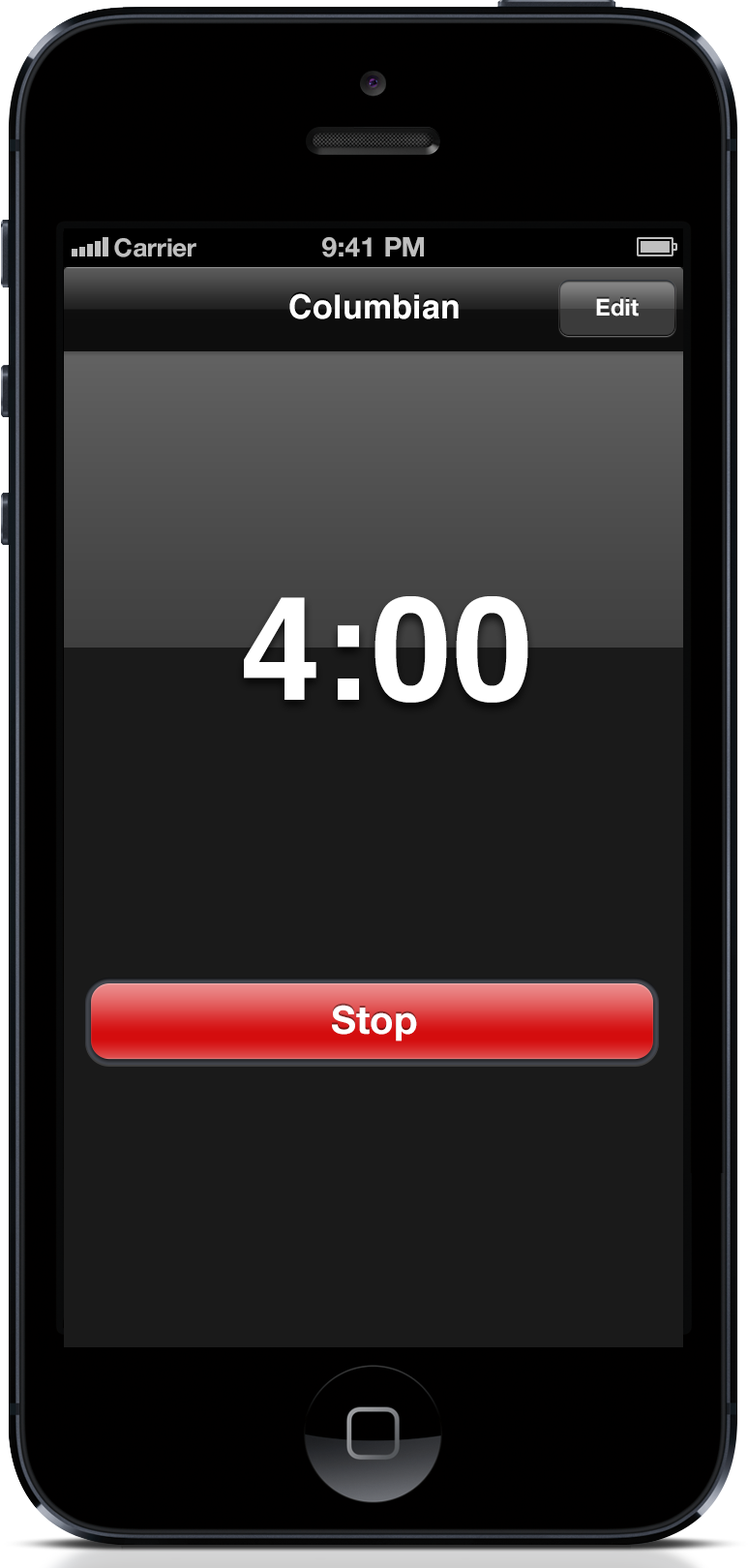
<style>
.page{position:relative;width:748px;height:1568px;background:#1a1a1a}
.page>*{position:absolute;margin:0}
.t1{font:25.2px "HelveticaNeue-Bold";color:#bfbfbf}
.t2{font:27.1px "HelveticaNeue-Bold";color:#bfbfbf;text-transform:uppercase}
.t3{font:32.9px "Helvetica-Bold";letter-spacing:0.005em;color:#ffffff}
.t4{font:23.2px "HelveticaNeue-Bold";color:#ffffff}
.t5{font:145.2px "Helvetica-Bold";letter-spacing:0.005em;color:#ffffff}
.t6{font:38.7px "HelveticaNeue-Bold";letter-spacing:0.005em;color:#ffffff}
</style>
<div class="page">
<p class="t1" style="left:114px;top:238px;width:82px;height:19px">Carrier</p>
<p class="t2" style="left:322px;top:237px;width:102px;height:20px">9:41 PM</p>
<p class="t3" style="left:289px;top:293px;width:170px;height:26px">Columbian</p>
<p class="t4" style="left:596px;top:298px;width:43px;height:19px">Edit</p>
<p class="t5" style="left:244px;top:596px;width:284px;height:107px">4:00</p>
<p class="t6" style="left:332px;top:1005px;width:85px;height:36px">Stop</p>
</div>
